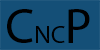
<style>
.page{position:relative;width:100px;height:50px;background:#144f77}
.page>*{position:absolute;margin:0}
.t1{font:25px "MyriadPro-Regular";color:#000000}
.t2{font:50px "MyriadPro-Regular";color:#000000}
</style>
<div class="page">
<p class="t1" style="left:7px;top:9px;width:83px;height:34px"><span class="t2">C</span>NC<span class="t2">P</span></p>
</div>
